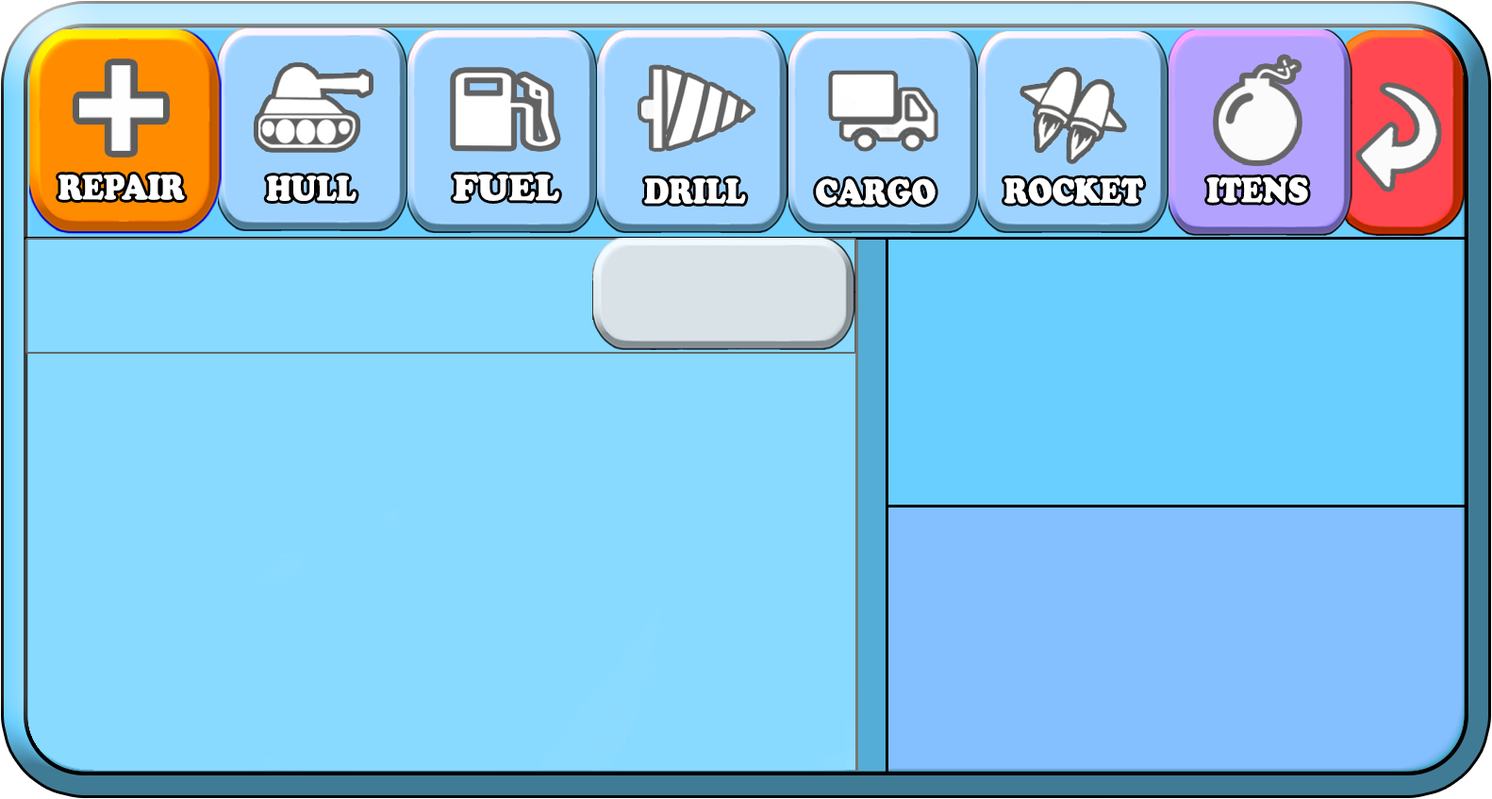
<style>
.page{position:relative;width:1492px;height:799px;background:#88daff}
.page>*{position:absolute;margin:0}
.t1{font:34.4px "CooperBlackStd";color:#ffffff;scale:0.85 1}
.t2{font:35.9px "CooperBlackStd";color:#ffffff}
</style>
<div class="page">
<p class="t1" style="left:58px;top:174px;width:127px;height:26px">REPAIR</p>
<p class="t2" style="left:453px;top:174px;width:106px;height:27px">FUEL</p>
<p class="t1" style="left:266px;top:175px;width:91px;height:26px">HULL</p>
<p class="t1" style="left:644px;top:178px;width:102px;height:26px">DRILL</p>
<p class="t1" style="left:816px;top:178px;width:120px;height:27px">CARGO</p>
<p class="t1" style="left:1005px;top:177px;width:139px;height:27px">ROCKET</p>
<p class="t1" style="left:1207px;top:176px;width:101px;height:27px">ITENS</p>
</div>
